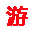
<style>
.page{position:relative;width:32px;height:32px;background:#ffffff}
.page>*{position:absolute;margin:0}
.t1{font:20.8px "MicrosoftYaHei";color:#f60712;font-weight:bold}
</style>
<div class="page">
<p class="t1" style="left:6px;top:6px;width:22px;height:20px">游</p>
</div>
